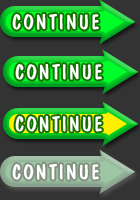
<style>
.page{position:relative;width:140px;height:200px;background:#333333}
.page>*{position:absolute;margin:0}
.t1{font:21.1px "DomCasualBT-Regular";letter-spacing:0.09em;color:#ffffff;font-variant:small-caps}
</style>
<div class="page">
<p class="t1" style="left:12px;top:13px;width:87px;height:17px">CONTINUE</p>
<p class="t1" style="left:15px;top:63px;width:87px;height:17px">CONTINUE</p>
<p class="t1" style="left:15px;top:115px;width:87px;height:17px">CONTINUE</p>
<p class="t1" style="left:12px;top:163px;width:87px;height:17px">CONTINUE</p>
</div>
